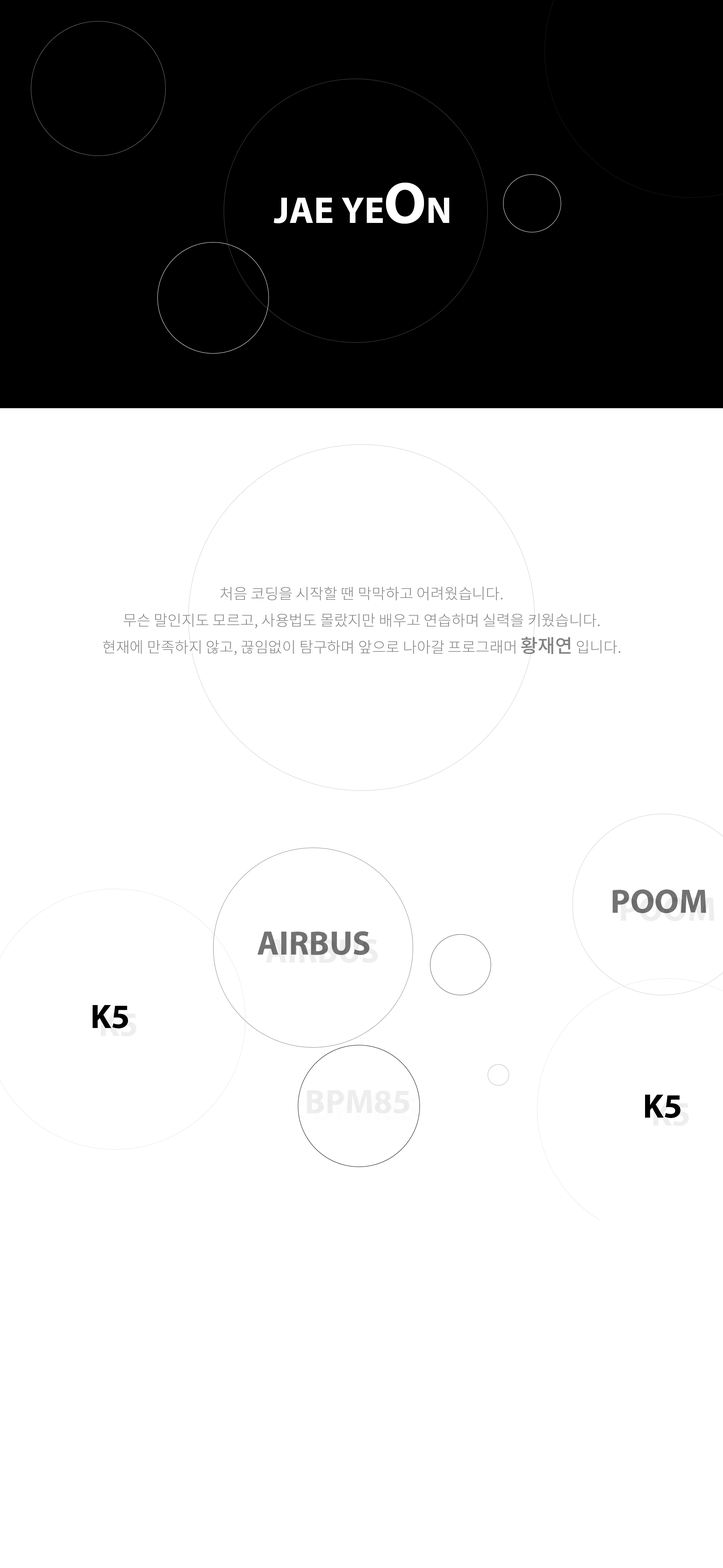
<style>
.page{position:relative;width:723px;height:1568px;background:#ffffff}
.page>*{position:absolute;margin:0}
.t1{font:37.5px "MyriadPro-Bold";color:#ffffff}
.t2{font:58.6px "MyriadPro-Bold";color:#ffffff}
.t3{font:15.1px/26.7px "NotoSansKR-Light";color:#838383}
.t4{font:18.8px/26.7px "NotoSansKR-Medium";color:#838383}
.t5{font:33.9px "MyriadPro-Bold";color:#737373}
.t6{font:33.9px "MyriadPro-Bold";color:#000000}
.t7{font:33.9px "MyriadPro-Bold";color:#eeeeee}
</style>
<div class="page">
<p class="t1" style="left:274px;top:183px;width:175px;height:41px">JAE YE<span class="t2">O</span>N</p>
<p class="t3" style="left:103px;top:586px;width:518px;height:69px;text-align:center">처음 코딩을 시작할 땐 막막하고 어려웠습니다.<br>무슨 말인지도 모르고, 사용법도 몰랐지만 배우고 연습하며 실력을 키웠습니다.<br>현재에 만족하지 않고, 끊임없이 탐구하며 앞으로 나아갈 프로그래머 <span class="t4">황재연</span> 입니다.</p>
<p class="t5" style="left:613px;top:889px;width:93px;height:24px">POOM</p>
<p class="t5" style="left:257px;top:931px;width:112px;height:24px">AIRBUS</p>
<p class="t6" style="left:93px;top:1005px;width:35px;height:23px">K5</p>
<p class="t7" style="left:307px;top:1090px;width:102px;height:23px">BPM85</p>
<p class="t6" style="left:645px;top:1095px;width:35px;height:23px">K5</p>
</div>
